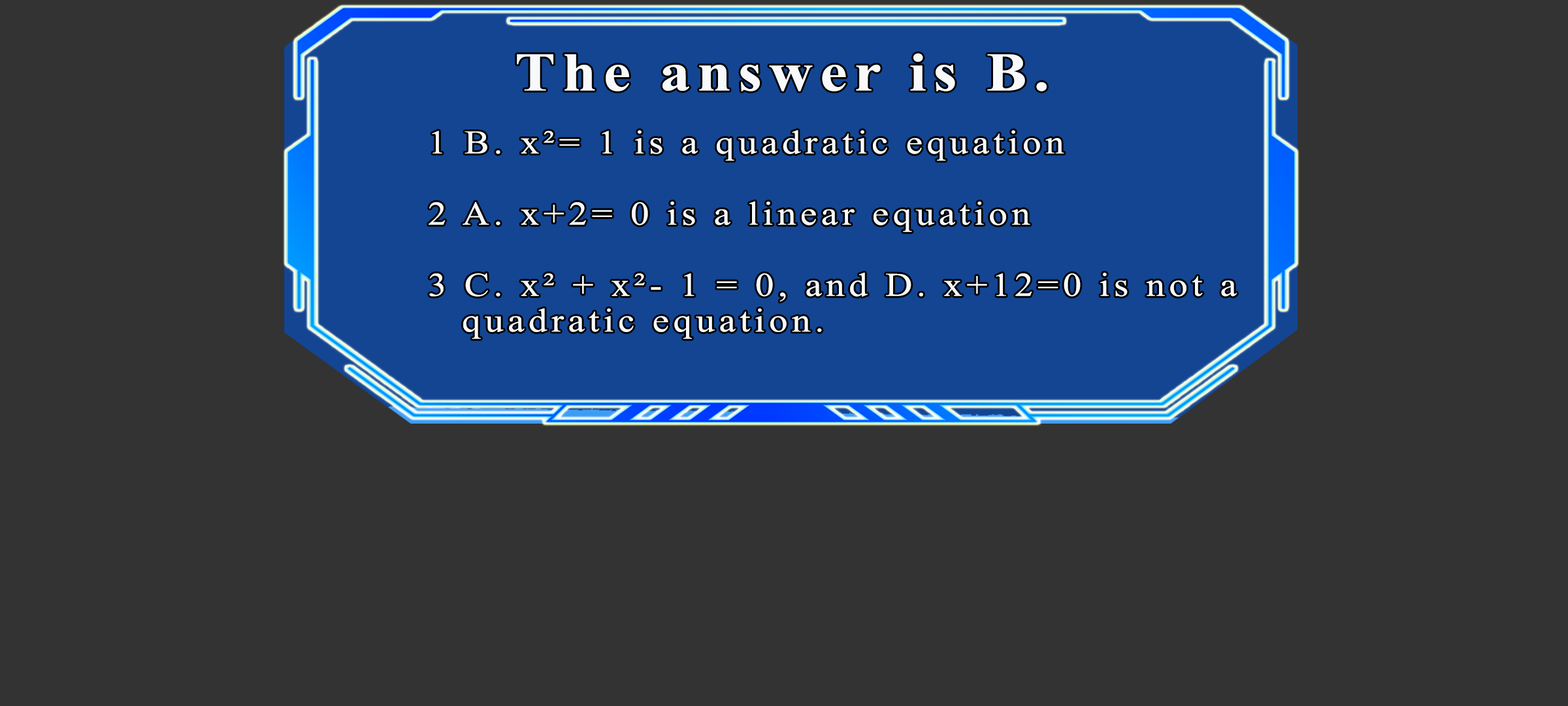
<style>
.page{position:relative;width:1568px;height:706px;background:#333333}
.page>*{position:absolute;margin:0}
.t1{font:54.4px "TimesNewRomanPS-BoldMT";letter-spacing:0.115em;color:#f7f9fb;scale:1.12 1}
.t2{font:33.2px/35.6px "TimesNewRomanPSMT";letter-spacing:0.115em;color:#f7f9fb;scale:1.12 1}
</style>
<div class="page">
<p class="t1" style="left:517px;top:53px;width:530px;height:38px">The answer is B.</p>
<p class="t2" style="left:429px;top:130px;width:808px;height:209px">1 B. x²= 1 is a quadratic equation<br><br>2 A. x+2= 0 is a linear equation<br><br>3 C. x² + x²- 1 = 0, and D. x+12=0 is not a<br>  quadratic equation.</p>
</div>
